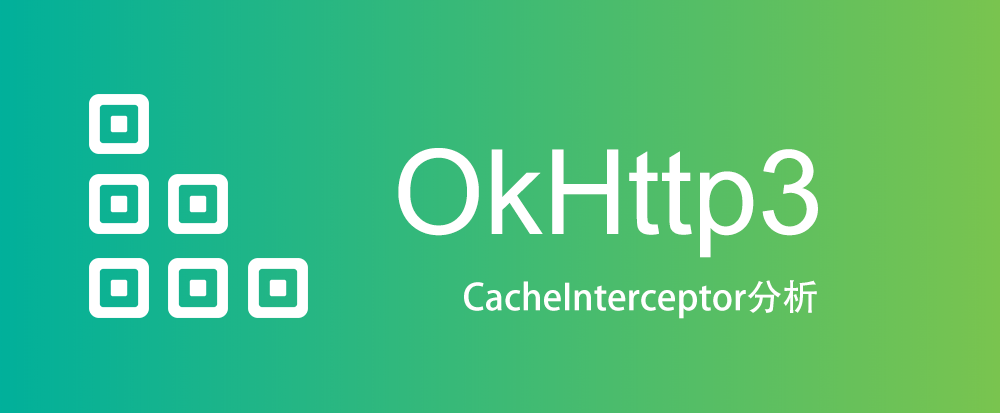
<style>
.page{position:relative;width:1000px;height:413px}
.page>*{position:absolute;margin:0}
.t1{font:117.5px "ArialMT";color:#ffffff}
.t2{font:36px "AdobeHeitiStd-Regular";color:#ffffff}
</style>
<div class="page">
<p class="t1" style="left:398px;top:148px;width:420px;height:110px">OkHttp3</p>
<p class="t2" style="left:464px;top:280px;width:353px;height:39px">CacheInterceptor分析</p>
</div>
